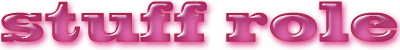
<style>
.page{position:relative;width:400px;height:50px}
.page>*{position:absolute;margin:0}
.t1{font:53.8px "BlackoakStd";scale:0.69 1}
</style>
<div class="page">
<p class="t1" style="left:1px;top:1px;width:396px;height:41px">stuff role</p>
</div>
